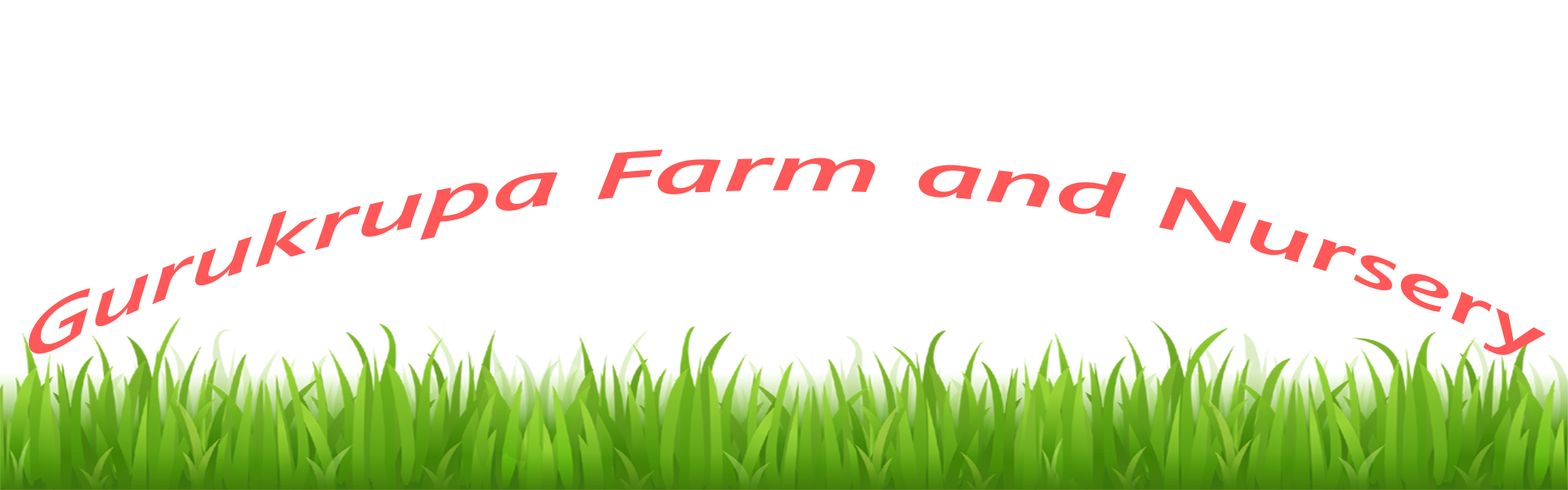
<style>
.page{position:relative;width:1568px;height:490px;background:#ffffff}
.page>*{position:absolute;margin:0}
.t1{font:63.5px "SegoeUI-SemiboldItalic";color:#ff5858;scale:1.8 1}
</style>
<div class="page">
<p class="t1" style="left:28px;top:149px;width:1518px;height:206px;text-align:center">Gurukrupa Farm and Nursery</p>
</div>
